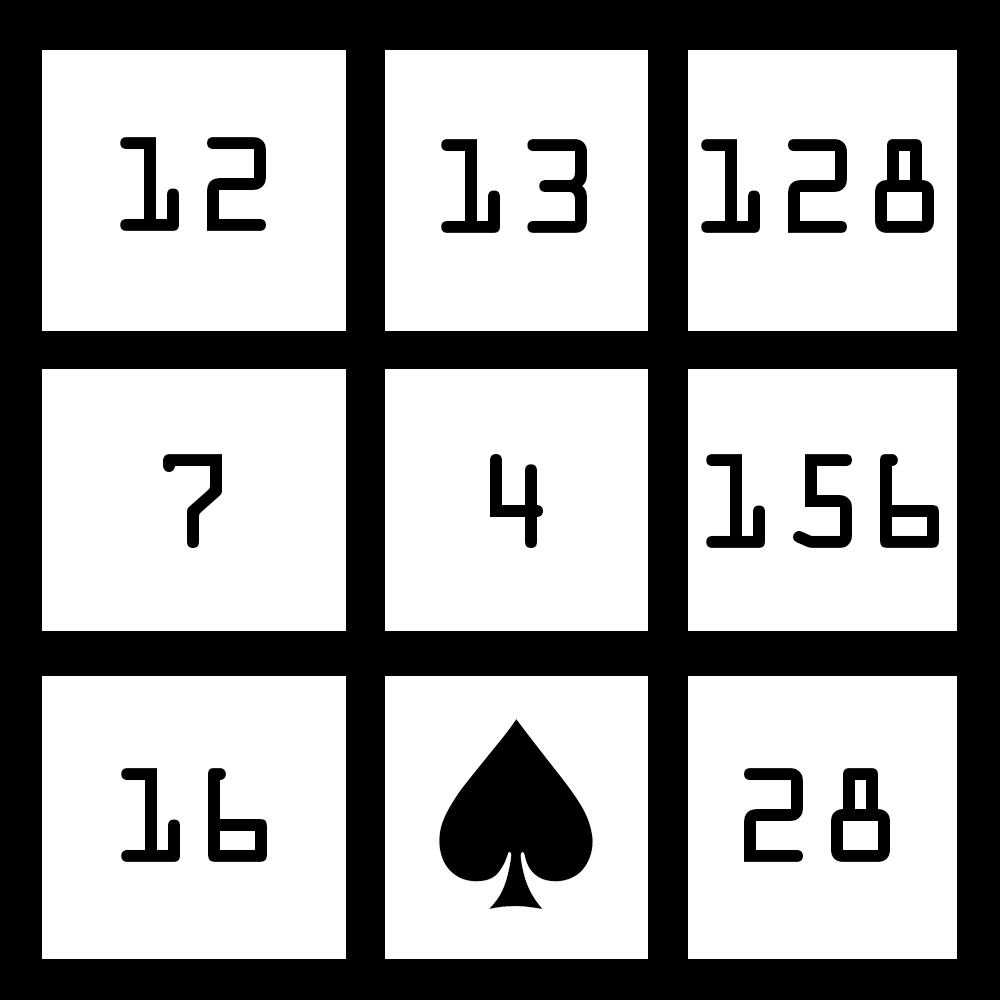
<style>
.page{position:relative;width:1000px;height:1000px;background:#ffffff}
.page>*{position:absolute;margin:0}
.t1{font:121px "OCRAStd";color:#000000}
</style>
<div class="page">
<p class="t1" style="left:120px;top:137px;width:146px;height:94px">12</p>
<p class="t1" style="left:441px;top:139px;width:146px;height:94px">13</p>
<p class="t1" style="left:701px;top:139px;width:233px;height:94px">128</p>
<p class="t1" style="left:163px;top:454px;width:59px;height:94px">7</p>
<p class="t1" style="left:490px;top:454px;width:54px;height:94px">4</p>
<p class="t1" style="left:706px;top:454px;width:233px;height:94px">156</p>
<p class="t1" style="left:121px;top:768px;width:146px;height:94px">16</p>
<p class="t1" style="left:744px;top:768px;width:146px;height:94px">28</p>
</div>
